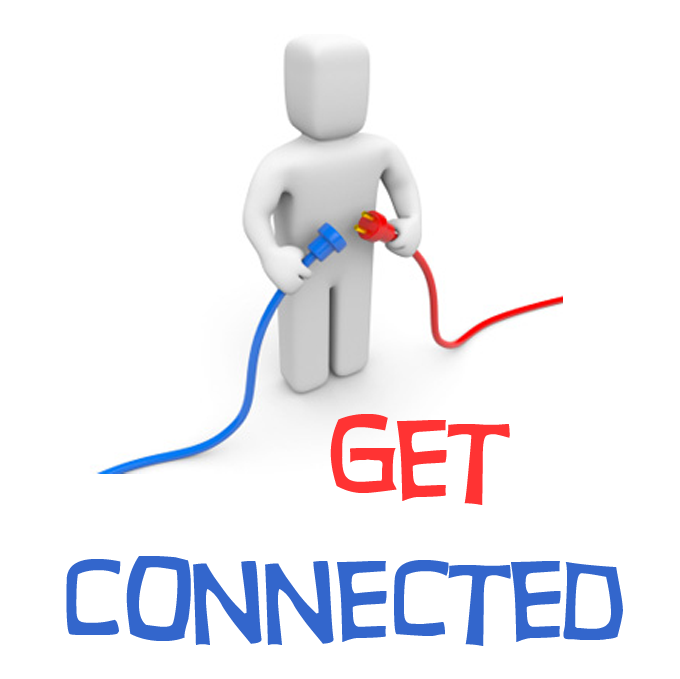
<style>
.page{position:relative;width:680px;height:679px;background:#ffffff}
.page>*{position:absolute;margin:0}
.t1{font:109px "HurryUp";color:#ff3333}
.t2{font:109px "HurryUp";color:#3366cc}
</style>
<div class="page">
<p class="t1" style="left:330px;top:414px;width:180px;height:91px">Get</p>
<p class="t2" style="left:66px;top:556px;width:557px;height:90px">Connected</p>
</div>
